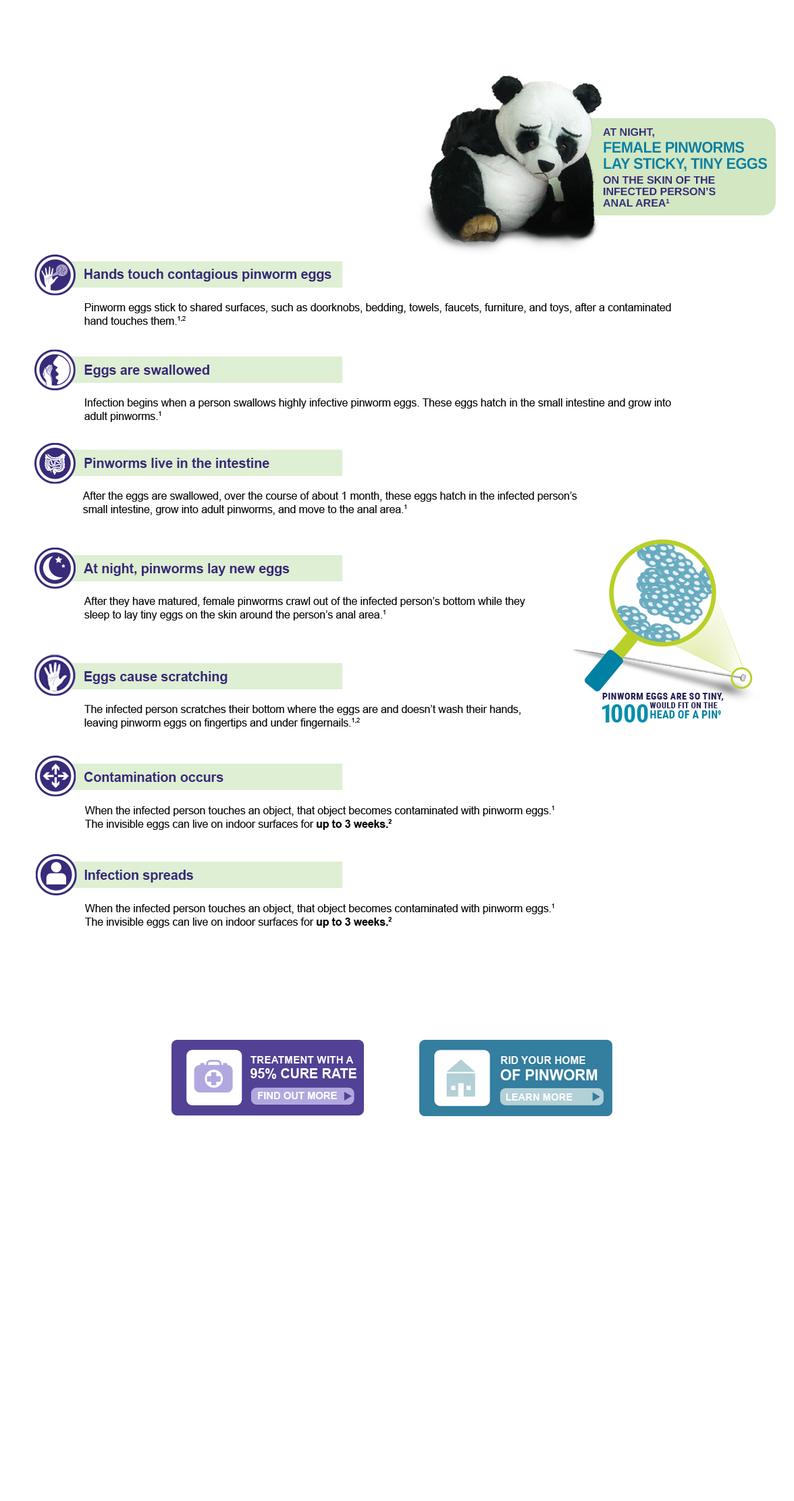
<style>
.page{position:relative;width:794px;height:1501px;background:#ffffff}
.page>*{position:absolute;margin:0}
.t1{font:10.8px "Arimo-Bold";color:#382a7a;text-transform:uppercase}
.t2{font:15.5px/13.5px "Arimo-Bold";letter-spacing:-0.025em;color:#0080a3;text-transform:uppercase;scale:0.95 1}
.t3{font:10.8px/9.5px "Arimo-Bold";color:#382a7a;text-transform:uppercase}
.t4{font:13.5px "Arial-BoldMT";letter-spacing:-0.01em;color:#39297a}
.t5{font:10.8px/13.5px "ArialMT";letter-spacing:-0.01em;color:#030404}
.t6{font:10.8px/13.5px "Arial-BoldMT";letter-spacing:-0.01em;color:#030404}
</style>
<div class="page">
<p class="t1" style="left:603px;top:128px;width:51px;height:10px">AT NIGHT,</p>
<p class="t2" style="left:604px;top:142px;width:163px;height:30px">FEMALE PINWORMS<br>LAY STICKY, TINY EGGS</p>
<p class="t3" style="left:603px;top:176px;width:113px;height:31px">ON THE SKIN OF THE<br>INFECTED PERSON’S<br>ANAL AREA1</p>
<p class="t4" style="left:84px;top:269px;width:248px;height:13px">Hands touch contagious pinworm eggs</p>
<p class="t5" style="left:84px;top:303px;width:587px;height:22px">Pinworm eggs stick to shared surfaces, such as doorknobs, bedding, towels, faucets, furniture, and toys, after a contaminated <br>hand touches them.1,2</p>
<p class="t4" style="left:84px;top:365px;width:125px;height:13px">Eggs are swallowed</p>
<p class="t5" style="left:84px;top:398px;width:587px;height:24px">Infection begins when a person swallows highly infective pinworm eggs. These eggs hatch in the small intestine and grow into <br>adult pinworms.1</p>
<p class="t4" style="left:84px;top:458px;width:185px;height:10px">Pinworms live in the intestine</p>
<p class="t5" style="left:82px;top:492px;width:495px;height:23px">After the eggs are swallowed, over the course of about 1 month, these eggs hatch in the infected person’s <br>small intestine, grow into adult pinworms, and move to the anal area.1</p>
<p class="t4" style="left:84px;top:563px;width:206px;height:13px">At night, pinworms lay new eggs</p>
<p class="t5" style="left:84px;top:597px;width:441px;height:24px">After they have matured, female pinworms crawl out of the infected person’s bottom while they <br>sleep to lay tiny eggs on the skin around the person’s anal area.1</p>
<p class="t4" style="left:84px;top:671px;width:144px;height:13px">Eggs cause scratching</p>
<p class="t5" style="left:84px;top:705px;width:437px;height:24px">The infected person scratches their bottom where the eggs are and doesn’t wash their hands, <br>leaving pinworm eggs on fingertips and under fingernails.1,2</p>
<p class="t4" style="left:84px;top:772px;width:140px;height:10px">Contamination occurs</p>
<p class="t5" style="left:85px;top:806px;width:469px;height:24px">When the infected person touches an object, that object becomes contaminated with pinworm eggs.1 <br>The invisible eggs can live on indoor surfaces for <span class="t6">up to 3 weeks.2</span></p>
<p class="t4" style="left:84px;top:870px;width:109px;height:13px">Infection spreads</p>
<p class="t5" style="left:85px;top:904px;width:469px;height:24px">When the infected person touches an object, that object becomes contaminated with pinworm eggs.1 <br>The invisible eggs can live on indoor surfaces for <span class="t6">up to 3 weeks.2</span></p>
</div>
